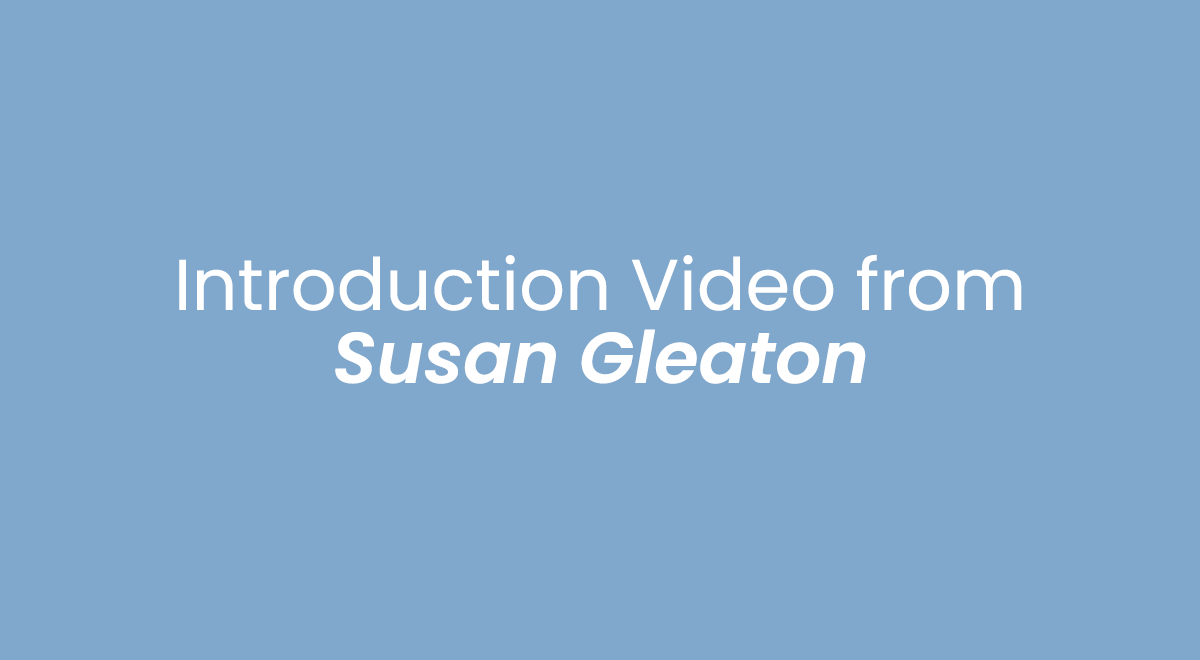
<style>
.page{position:relative;width:1200px;height:660px;background:#7fa8cc}
.page>*{position:absolute;margin:0}
.t1{font:72px "Poppins-Regular";color:#ffffff}
.t2{font:72px "Poppins-SemiBoldItalic";color:#ffffff}
</style>
<div class="page">
<p class="t1" style="left:179px;top:254px;width:843px;height:57px">Introduction Video from</p>
<p class="t2" style="left:335px;top:329px;width:531px;height:55px">Susan Gleaton</p>
</div>
